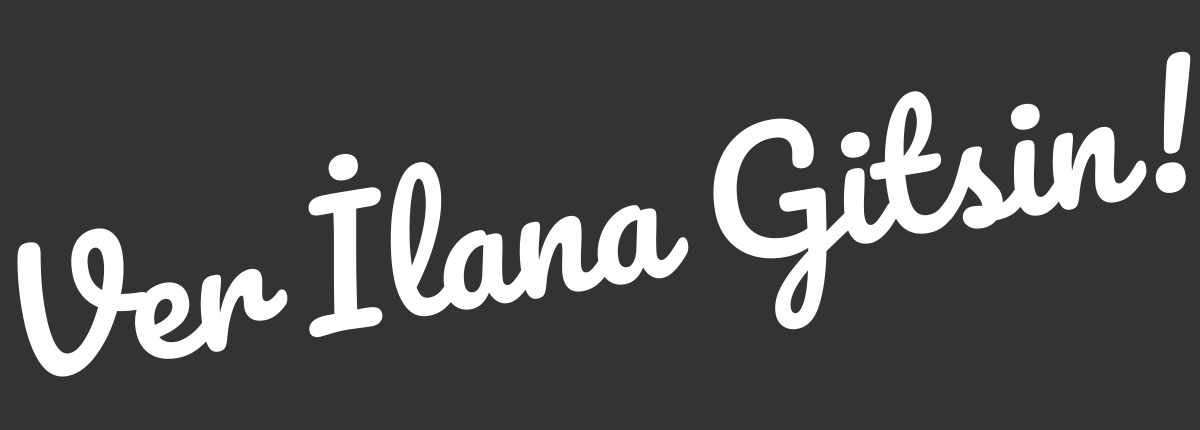
<style>
.page{position:relative;width:1200px;height:430px;background:#333333}
.page>*{position:absolute;margin:0}
.t1{font:161.8px "Pacifico-Regular";color:#fefefe}
</style>
<div class="page">
<p class="t1" style="left:17px;top:51px;width:1174px;height:326px;rotate:-9deg">Ver İlana Gitsin!</p>
</div>
